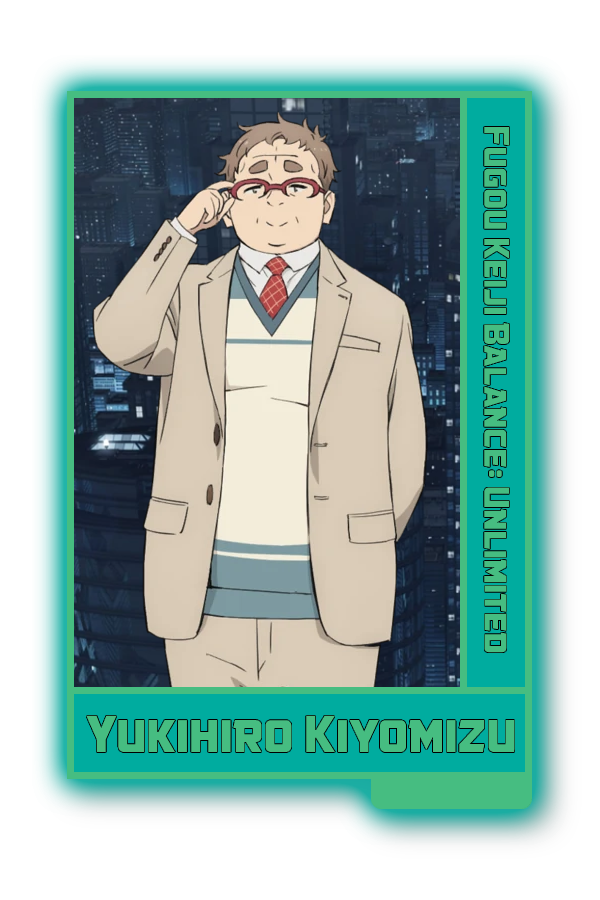
<style>
.page{position:relative;width:600px;height:900px;background:#ffffff}
.page>*{position:absolute;margin:0}
.t1{font:37.3px "GovernmentAgentBB";color:#46bd81}
.t2{font:54.1px "GovernmentAgentBB";color:#46bd81}
</style>
<div class="page">
<p class="t1" style="left:484px;top:127px;width:26px;height:526px;rotate:90deg">Fugou Keiji Balance: Unlimited</p>
<p class="t2" style="left:86px;top:715px;width:429px;height:37px">Yukihiro Kiyomizu</p>
</div>
